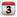
<style>
.page{position:relative;width:17px;height:17px;background:#ffffff}
.page>*{position:absolute;margin:0}
.t1{font:9.6px "BookAntiqua";color:#000000;font-weight:bold}
</style>
<div class="page">
<p class="t1" style="left:6px;top:6px;width:6px;height:8px">3</p>
</div>
